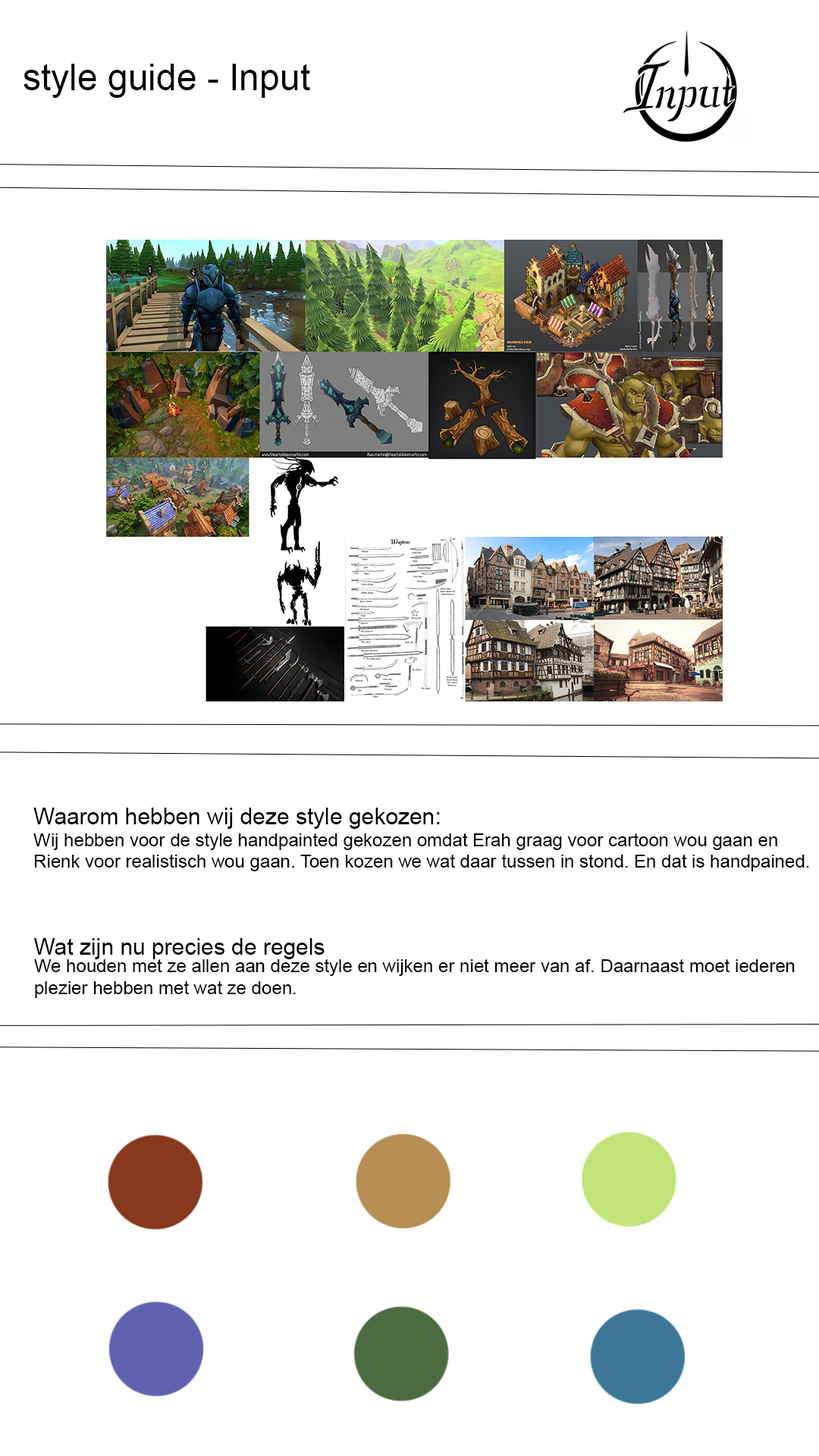
<style>
.page{position:relative;width:819px;height:1456px;background:#ffffff}
.page>*{position:absolute;margin:0}
.t1{font:36.4px "ArialMT";color:#000000}
.t2{font:18.2px "ArialMT";color:#000000}
.t3{font:22.7px "ArialMT";color:#000000}
</style>
<div class="page">
<p class="t1" style="left:24px;top:64px;width:286px;height:34px">style guide - Input</p>
<p class="t2" style="left:33px;top:808px;width:776px;height:63px"><span class="t3">Waarom hebben wij deze style gekozen:<br></span>Wij hebben voor de style handpainted gekozen omdat Erah graag voor cartoon wou gaan en <br>Rienk voor realistisch wou gaan. Toen kozen we wat daar tussen in stond. En dat is handpained.</p>
<p class="t3" style="left:33px;top:938px;width:292px;height:21px">Wat zijn nu precies de regels</p>
<p class="t2" style="left:34px;top:959px;width:761px;height:39px">We houden met ze allen aan deze style en wijken er niet meer van af. Daarnaast moet iederen<br>plezier hebben met wat ze doen.</p>
</div>
